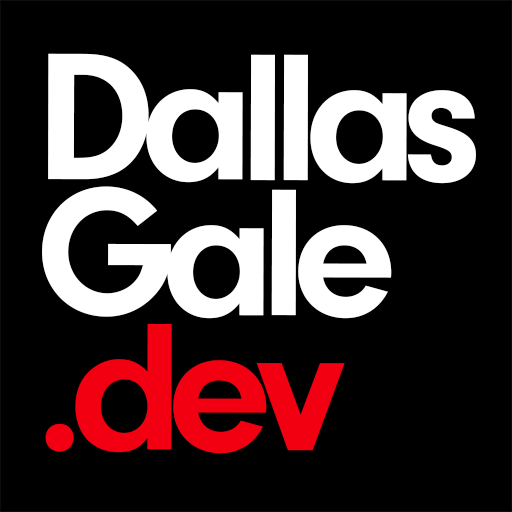
<style>
.page{position:relative;width:512px;height:512px;background:#000000}
.page>*{position:absolute;margin:0}
.t1{font:187.7px/135px "NeuzeitGro-Bol";letter-spacing:-0.08em;color:#ffffff}
.t2{font:187.7px/135px "NeuzeitGro-Bol";letter-spacing:-0.08em;color:#f20011}
</style>
<div class="page">
<p class="t1" style="left:42px;top:53px;width:434px;height:401px">Dallas<br>Gale<br><span class="t2">.dev</span></p>
</div>
